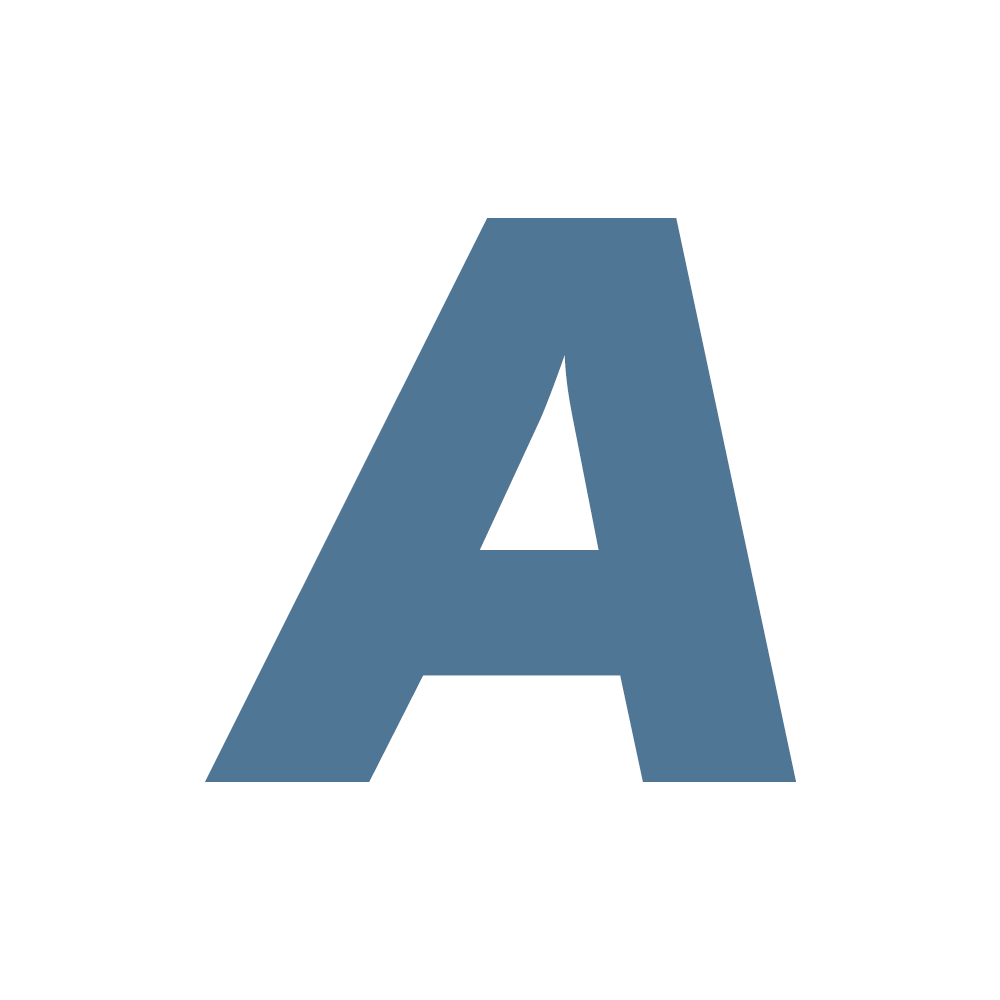
<style>
.page{position:relative;width:1000px;height:1000px;background:#ffffff}
.page>*{position:absolute;margin:0}
.t1{font:789.1px "FuturaBT-BoldItalic";color:#4f7795}
</style>
<div class="page">
<p class="t1" style="left:205px;top:218px;width:591px;height:564px">A</p>
</div>
